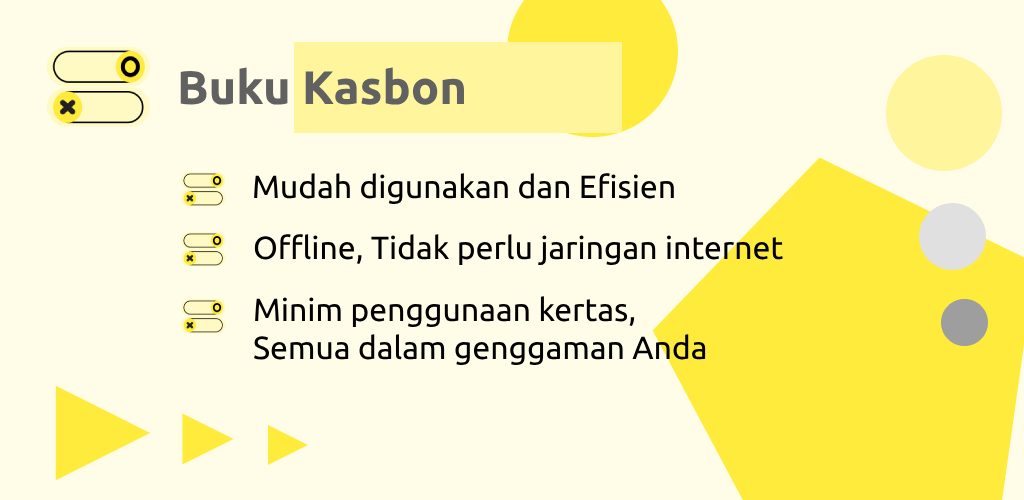
<style>
.page{position:relative;width:1024px;height:500px;background:#fffde7}
.page>*{position:absolute;margin:0}
.t1{font:47px "Ubuntu-Bold";color:#616161}
.t2{font:32px "Ubuntu-Regular";color:#000000}
</style>
<div class="page">
<p class="t1" style="left:180px;top:67px;width:284px;height:38px">Buku Kasbon</p>
<p class="t2" style="left:254px;top:173px;width:420px;height:32px">Mudah digunakan dan Efisien</p>
<p class="t2" style="left:254px;top:234px;width:529px;height:32px">Offline, Tidak perlu jaringan internet</p>
<p class="t2" style="left:254px;top:296px;width:452px;height:70px">Minim penggunaan kertas,<br>Semua dalam genggaman Anda</p>
</div>
